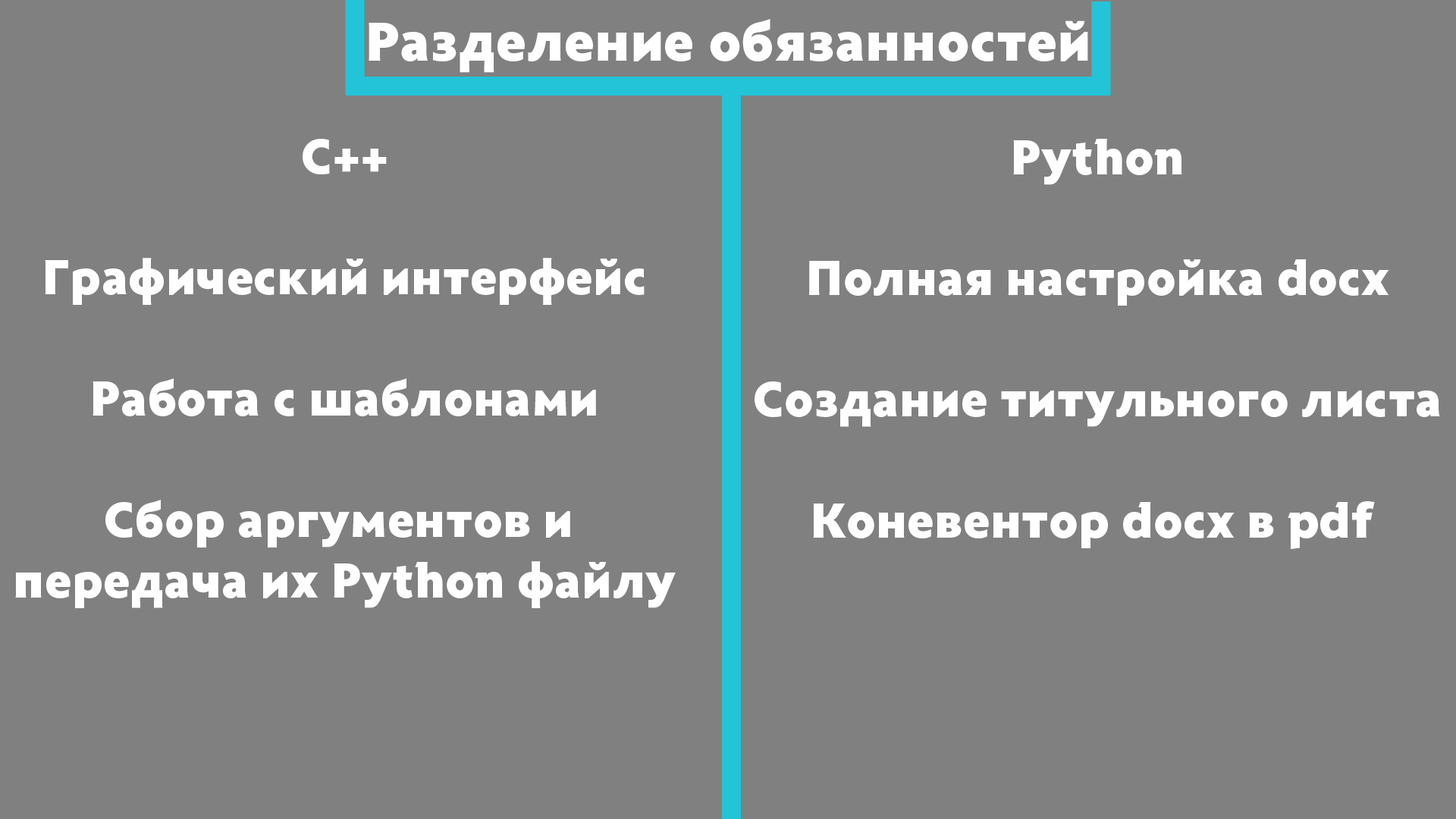
<style>
.page{position:relative;width:1456px;height:819px;background:#808080}
.page>*{position:absolute;margin:0}
.t1{font:56.9px "Radiance-Black";color:#ffffff}
.t2{font:50.6px "Radiance-Black";color:#ffffff}
</style>
<div class="page">
<p class="t1" style="left:369px;top:19px;width:719px;height:54px">Разделение обязанностей</p>
<p class="t2" style="left:15px;top:139px;width:661px;height:469px;text-align:center">С++<br><br>Графический интерфейс<br><br>Работа с шаблонами<br><br>Сбор аргументов и <br>передача их Python файлу</p>
<p class="t2" style="left:755px;top:139px;width:685px;height:410px;text-align:center">Python<br><br>Полная настройка docx<br><br>Создание титульного листа<br><br>Коневентор docx в pdf</p>
</div>
